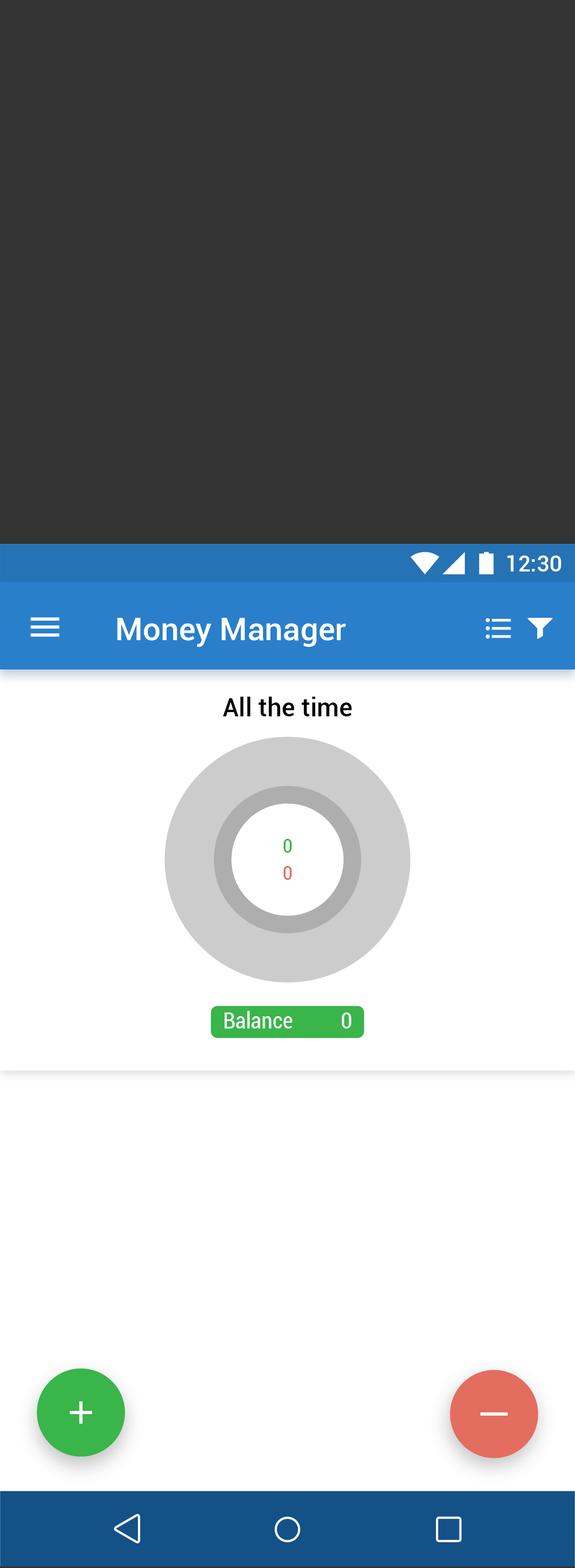
<style>
.page{position:relative;width:575px;height:1568px;background:#ffffff}
.page>*{position:absolute;margin:0}
.t1{font:22.4px "Roboto-Medium";color:#ffffff}
.t2{font:31.9px "Roboto-Medium";color:#ffffff}
.t3{font:25.6px "Roboto-Medium";color:#000000}
.t4{font:19.2px "Roboto-Condensed";color:#39b54a}
.t5{font:19.2px "Roboto-Condensed";color:#e36d5f}
.t6{font:22.4px "Roboto-Condensed";color:#ffffff}
</style>
<div class="page">
<p class="t1" style="left:508px;top:555px;width:53px;height:16px">12:30</p>
<p class="t2" style="left:117px;top:618px;width:229px;height:29px">Money Manager</p>
<p class="t3" style="left:223px;top:697px;width:129px;height:19px">All the time</p>
<p class="t4" style="left:283px;top:839px;width:9px;height:14px">0</p>
<p class="t5" style="left:283px;top:866px;width:9px;height:14px">0</p>
<p class="t6" style="left:224px;top:1011px;width:68px;height:17px">Balance</p>
<p class="t6" style="left:342px;top:1012px;width:10px;height:16px">0</p>
</div>
